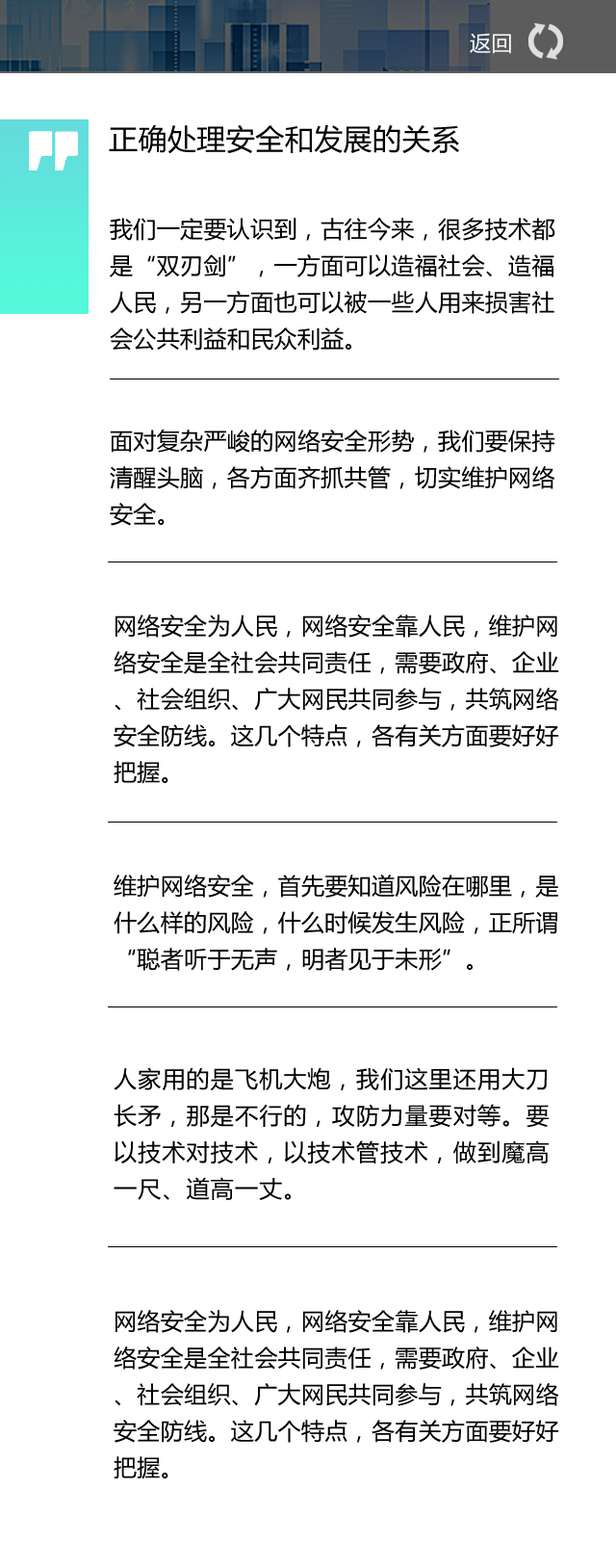
<style>
.page{position:relative;width:616px;height:1568px;background:#ffffff}
.page>*{position:absolute;margin:0}
.t1{font:21.2px "MicrosoftYaHei";letter-spacing:0.015em;color:#ffffff}
.t2{font:28.9px "MicrosoftYaHei";letter-spacing:0.015em;color:#000000}
.t3{font:23.1px/36.6px "MicrosoftYaHei";letter-spacing:0.015em;color:#000000}
.t4{font:23.1px/36.6px "MicrosoftYaHei";letter-spacing:0.05em;color:#000000}
</style>
<div class="page">
<p class="t1" style="left:470px;top:33px;width:41px;height:21px">返回</p>
<p class="t2" style="left:109px;top:124px;width:350px;height:30px">正确处理安全和发展的关系</p>
<p class="t3" style="left:110px;top:218px;width:446px;height:133px">我们一定要认识到，古往今来，很多技术都是“双刃剑”，一方面可以造福社会、造福人民，另一方面也可以被一些人用来损害社会公共利益和民众利益。</p>
<p class="t3" style="left:110px;top:430px;width:446px;height:96px">面对复杂严峻的网络安全形势，我们要保持清醒头脑，各方面齐抓共管，切实维护网络安全。</p>
<p class="t3" style="left:114px;top:614px;width:446px;height:170px">网络安全为人民，网络安全靠人民，维护网络安全是全社会共同责任，需要政府、企业、社会组织、广大网民共同参与，共筑网络安全防线。这几个特点，各有关方面要好好把握。</p>
<p class="t3" style="left:114px;top:875px;width:446px;height:96px">维护网络安全，首先要知道风险在哪里，是什么样的风险，什么时候发生风险，正所谓“聪者听于无声，明者见于未形”。</p>
<p class="t4" style="left:114px;top:1067px;width:436px;height:133px">人家用的是飞机大炮，我们这里还用大刀长矛，那是不行的，攻防力量要对等。要以技术对技术，以技术管技术，做到魔高一尺、道高一丈。</p>
<p class="t3" style="left:114px;top:1310px;width:446px;height:169px">网络安全为人民，网络安全靠人民，维护网络安全是全社会共同责任，需要政府、企业、社会组织、广大网民共同参与，共筑网络安全防线。这几个特点，各有关方面要好好把握。</p>
</div>
